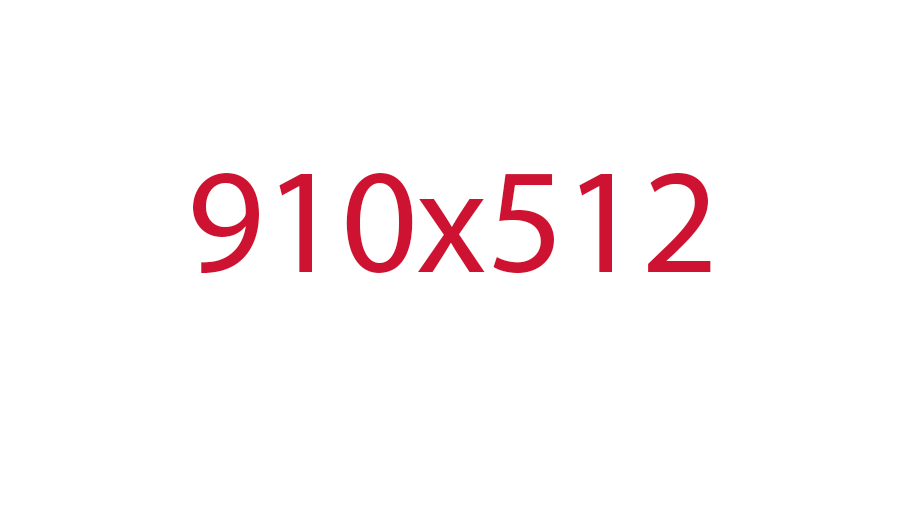
<style>
.page{position:relative;width:910px;height:512px;background:#ffffff}
.page>*{position:absolute;margin:0}
.t1{font:150px "MyriadPro-Regular";color:#ce1332}
</style>
<div class="page">
<p class="t1" style="left:193px;top:172px;width:518px;height:102px">910x512</p>
</div>
